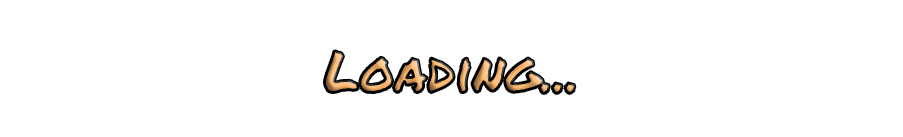
<style>
.page{position:relative;width:903px;height:137px;background:#ffffff}
.page>*{position:absolute;margin:0}
.t1{font:56px "PermanentMarker-Regular"}
</style>
<div class="page">
<p class="t1" style="left:324px;top:51px;width:251px;height:43px">Loading...</p>
</div>
